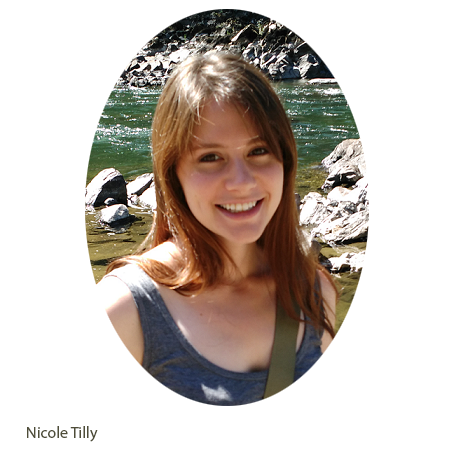
<style>
.page{position:relative;width:455px;height:455px;background:#ffffff}
.page>*{position:absolute;margin:0}
.t1{font:12px "MyriadPro-Regular";color:#4e4d38}
</style>
<div class="page">
<p class="t1" style="left:27px;top:426px;width:71px;height:16px">Nicole Tilly</p>
</div>
